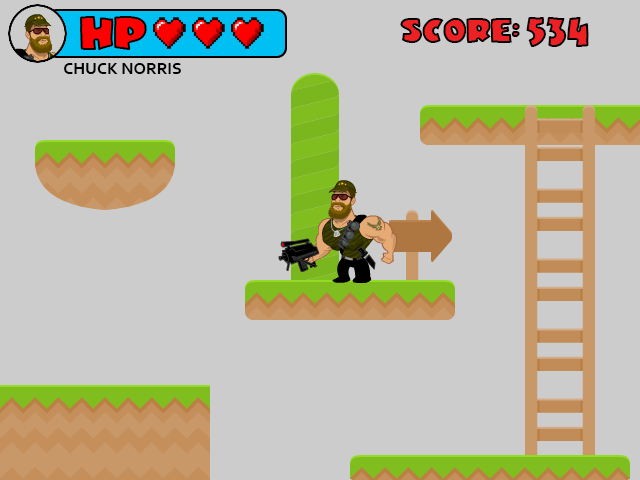
<style>
.page{position:relative;width:640px;height:480px;background:#cccccc}
.page>*{position:absolute;margin:0}
.t1{font:34px "JuneBug";color:#ff0000}
.t2{font:30px "JuneBug"}
.t3{font:25px "JuneBug"}
.t4{font:17px "Corbel-Bold";color:#000000}
</style>
<div class="page">
<p class="t1" style="left:79px;top:16px;width:68px;height:34px">HP</p>
<p class="t2" style="left:526px;top:17px;width:63px;height:30px">534</p>
<p class="t3" style="left:400px;top:18px;width:120px;height:25px">SCORE:</p>
<p class="t4" style="left:64px;top:63px;width:117px;height:11px">CHUCK NORRIS</p>
</div>
